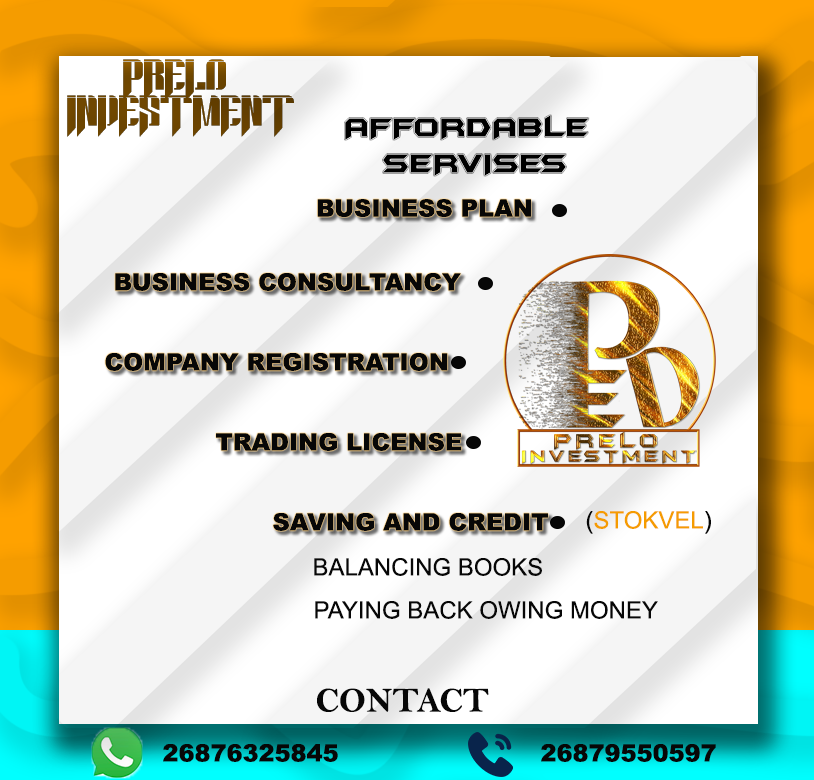
<style>
.page{position:relative;width:814px;height:780px;background:#f5f5f5}
.page>*{position:absolute;margin:0}
.t1{font:30px "BatmanForeverAlternate";color:#070707}
.t2{font:24px "Arial-Black";color:#070707}
.t3{font:24px "ArialMT";color:#f59c00}
.t4{font:24px "ArialMT";color:#070707}
.t5{font:35px "BellMTBold";color:#070707}
</style>
<div class="page">
<p class="t1" style="left:345px;top:115px;width:244px;height:61px;text-align:center">AFFORDABLE <br>SERVISES</p>
<p class="t2" style="left:317px;top:199px;width:214px;height:18px">BUSINESS PLAN</p>
<p class="t2" style="left:115px;top:273px;width:346px;height:18px">BUSINESS CONSULTANCY</p>
<p class="t2" style="left:105px;top:353px;width:343px;height:18px">COMPANY REGISTRATION</p>
<p class="t2" style="left:216px;top:433px;width:246px;height:18px">TRADING LICENSE</p>
<p class="t2" style="left:273px;top:513px;width:275px;height:18px">SAVING AND CREDIT</p>
<p class="t3" style="left:586px;top:511px;width:125px;height:23px"><span class="t4">(</span>STOKVEL<span class="t4">)</span></p>
<p class="t4" style="left:314px;top:558px;width:228px;height:18px">BALANCING BOOKS</p>
<p class="t4" style="left:315px;top:601px;width:343px;height:18px">PAYING BACK OWING MONEY</p>
<p class="t5" style="left:317px;top:688px;width:172px;height:24px">CONTACT</p>
<p class="t2" style="left:163px;top:744px;width:175px;height:18px">26876325845</p>
<p class="t2" style="left:541px;top:744px;width:175px;height:18px">26879550597</p>
</div>
